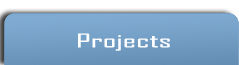
<style>
.page{position:relative;width:239px;height:65px}
.page>*{position:absolute;margin:0}
.t1{font:18px "AgencyFB-Reg";color:#ffffff;scale:2 1}
</style>
<div class="page">
<p class="t1" style="left:78px;top:33px;width:92px;height:18px">Projects</p>
</div>
